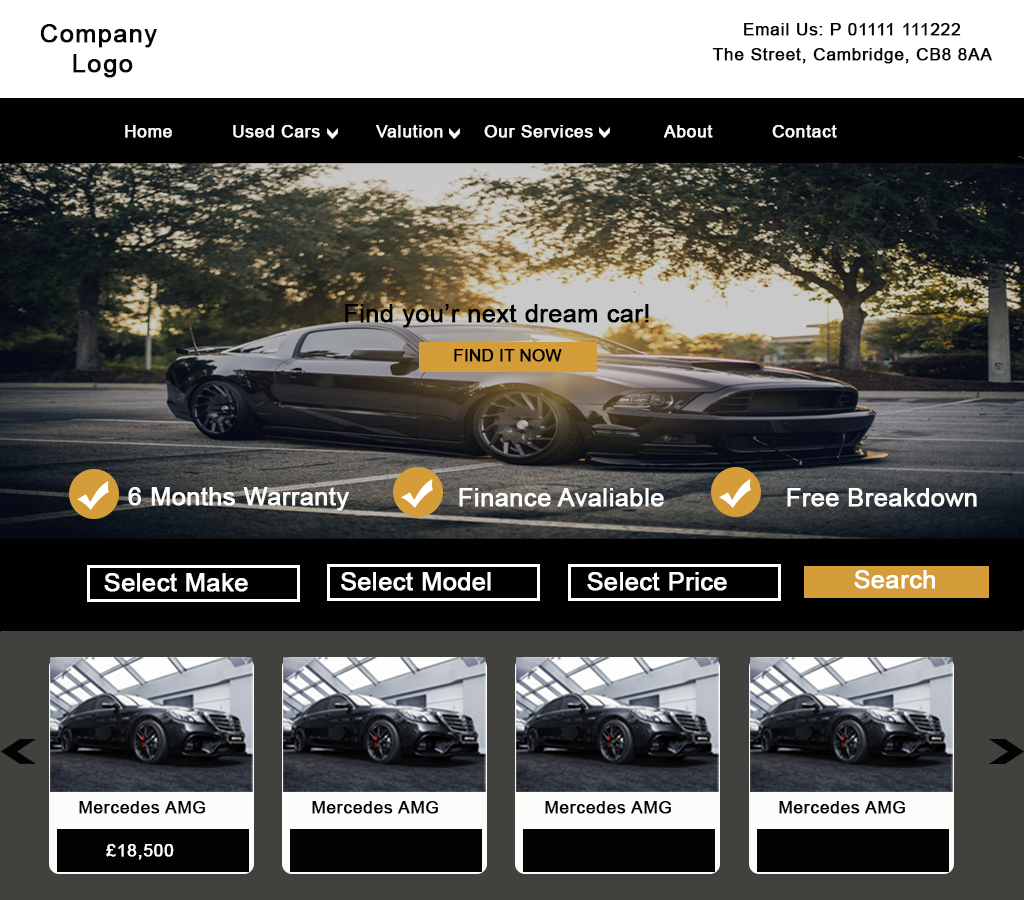
<style>
.page{position:relative;width:1024px;height:900px}
.page>*{position:absolute;margin:0}
.t1{font:25px "ArialMT";letter-spacing:0.04em;color:#060606;font-weight:bold}
.t2{font:16.7px/25px "ArialMT";letter-spacing:0.04em;color:#060606;font-weight:bold}
.t3{font:16.7px "ArialMT";letter-spacing:0.04em;color:#fcfafa;font-weight:bold}
.t4{font:25px "ArialMT";color:#010101;font-weight:bold}
.t5{font:16.7px "ArialMT";color:#010101;font-weight:bold}
.t6{font:25px "ArialMT";color:#fcfcfa;font-weight:bold}
.t7{font:25px "ArialMT";color:#ffffff;font-weight:bold}
.t8{font:16.7px "ArialMT";letter-spacing:0.04em;color:#030303;font-weight:bold}
.t9{font:16.7px "ArialMT";letter-spacing:0.04em;color:#ffffff;font-weight:bold}
</style>
<div class="page">
<p class="t1" style="left:40px;top:24px;width:117px;height:54px;text-align:center">Company <br>Logo</p>
<p class="t2" style="left:712px;top:23px;width:280px;height:41px;text-align:center">Email Us: P 01111 111222<br>The Street, Cambridge, CB8 8AA</p>
<p class="t3" style="left:125px;top:125px;width:712px;height:13px">Home  Used Cars  Valution  Our Services  About  Contact</p>
<p class="t4" style="left:345px;top:304px;width:304px;height:24px">Find you’r next dream car!</p>
<p class="t5" style="left:454px;top:349px;width:108px;height:13px">FIND IT NOW</p>
<p class="t6" style="left:128px;top:487px;width:221px;height:24px">6 Months Warranty</p>
<p class="t6" style="left:459px;top:488px;width:205px;height:19px">Finance Avaliable</p>
<p class="t6" style="left:787px;top:488px;width:190px;height:19px">Free Breakdown</p>
<p class="t7" style="left:104px;top:573px;width:144px;height:19px">Select Make</p>
<p class="t7" style="left:341px;top:572px;width:150px;height:19px">Select Model</p>
<p class="t7" style="left:587px;top:572px;width:140px;height:19px">Select Price</p>
<p class="t7" style="left:854px;top:570px;width:81px;height:19px">Search</p>
<p class="t8" style="left:79px;top:801px;width:126px;height:13px">Mercedes AMG</p>
<p class="t8" style="left:312px;top:801px;width:126px;height:13px">Mercedes AMG</p>
<p class="t8" style="left:545px;top:801px;width:126px;height:13px">Mercedes AMG</p>
<p class="t8" style="left:779px;top:801px;width:126px;height:13px">Mercedes AMG</p>
<p class="t9" style="left:106px;top:844px;width:68px;height:16px">£18,500</p>
</div>
